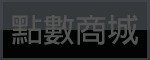
<style>
.page{position:relative;width:150px;height:60px;background:#35393c}
.page>*{position:absolute;margin:0}
.t1{font:32px "AdobeFanHeitiStd-Bold";color:#555555}
</style>
<div class="page">
<p class="t1" style="left:12px;top:14px;width:126px;height:31px">點數商城</p>
</div>
